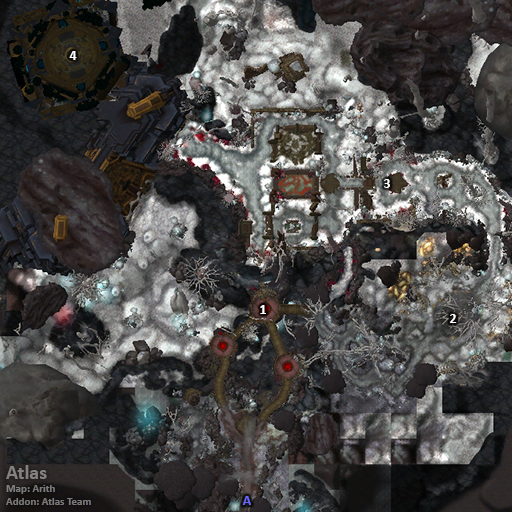
<style>
.page{position:relative;width:512px;height:512px}
.page>*{position:absolute;margin:0}
.t1{font:14px "Calibri-Bold";color:#ffffff}
.t2{font:11px "Calibri-Bold";color:#828080}
.t3{font:20px "Calibri-Bold";color:#828080}
.t4{font:14px "Calibri-Bold";color:#6666ff}
</style>
<div class="page">
<p class="t1" style="left:69px;top:51px;width:8px;height:9px">4</p>
<p class="t1" style="left:384px;top:179px;width:6px;height:9px">3</p>
<p class="t1" style="left:260px;top:305px;width:6px;height:9px">1</p>
<p class="t1" style="left:450px;top:314px;width:7px;height:9px">2</p>
<p class="t2" style="left:6px;top:465px;width:85px;height:40px"><span class="t3">Atlas<br></span>Map: Arith<br>Addon: Atlas Team</p>
<p class="t4" style="left:242px;top:496px;width:9px;height:9px">A</p>
</div>
